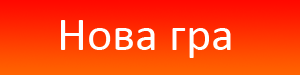
<style>
.page{position:relative;width:300px;height:75px}
.page>*{position:absolute;margin:0}
.t1{font:48px "Calibri";color:#ffffff}
</style>
<div class="page">
<p class="t1" style="left:61px;top:20px;width:170px;height:38px">Нова гра</p>
</div>
